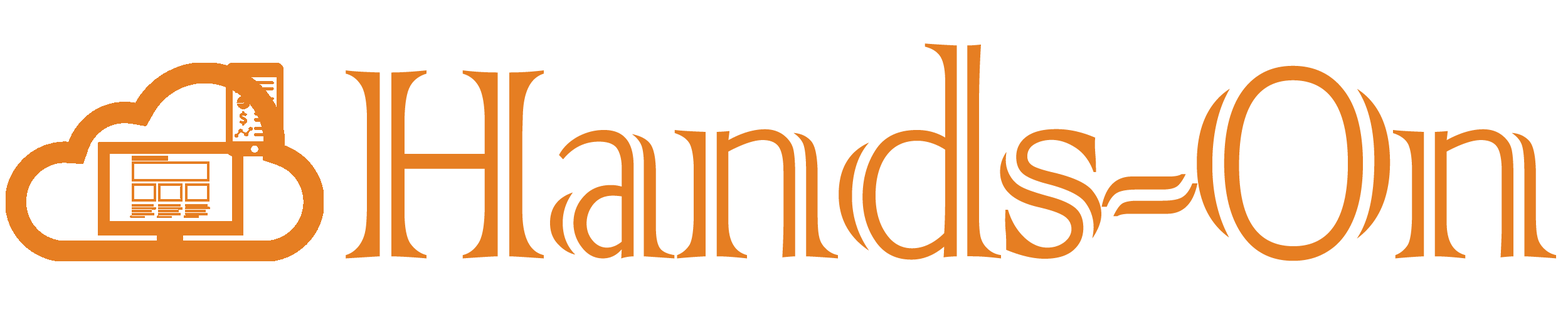
<style>
.page{position:relative;width:1568px;height:314px;background:#ffffff}
.page>*{position:absolute;margin:0}
.t1{font:356.5px "ColonnaMT";letter-spacing:-0.04em;color:#e67e22;scale:0.91 1}
</style>
<div class="page">
<p class="t1" style="left:346px;top:43px;width:1210px;height:218px">Hands-On</p>
</div>
